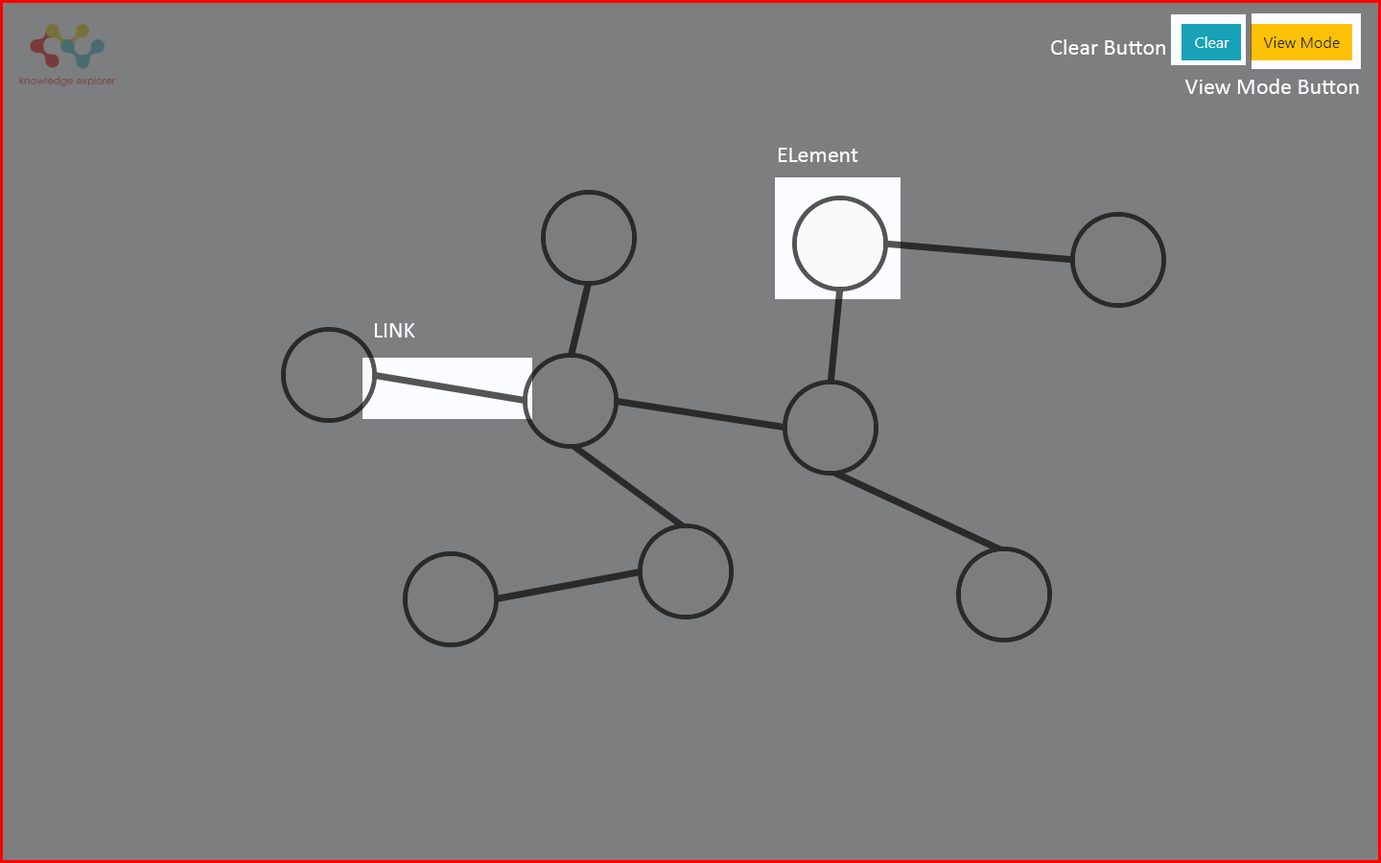
<style>
.page{position:relative;width:1381px;height:863px;background:#7d7e7f}
.page>*{position:absolute;margin:0}
.t1{font:23px "Calibri";color:#fafcff}
</style>
<div class="page">
<p class="t1" style="left:1051px;top:39px;width:114px;height:16px">Clear Button</p>
<p class="t1" style="left:1185px;top:79px;width:174px;height:15px">View Mode Button</p>
<p class="t1" style="left:778px;top:148px;width:80px;height:14px">ELement</p>
<p class="t1" style="left:374px;top:323px;width:41px;height:15px">LINK</p>
</div>
